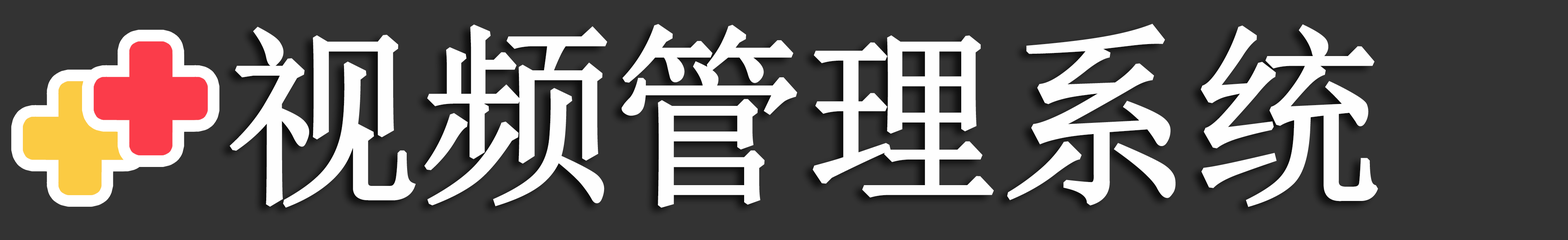
<style>
.page{position:relative;width:1568px;height:240px;background:#333333}
.page>*{position:absolute;margin:0}
.t1{font:193.5px "SimSun";letter-spacing:-0.03em;color:#fefefe;font-weight:bold}
</style>
<div class="page">
<p class="t1" style="left:229px;top:24px;width:1149px;height:184px">视频管理系统</p>
</div>
